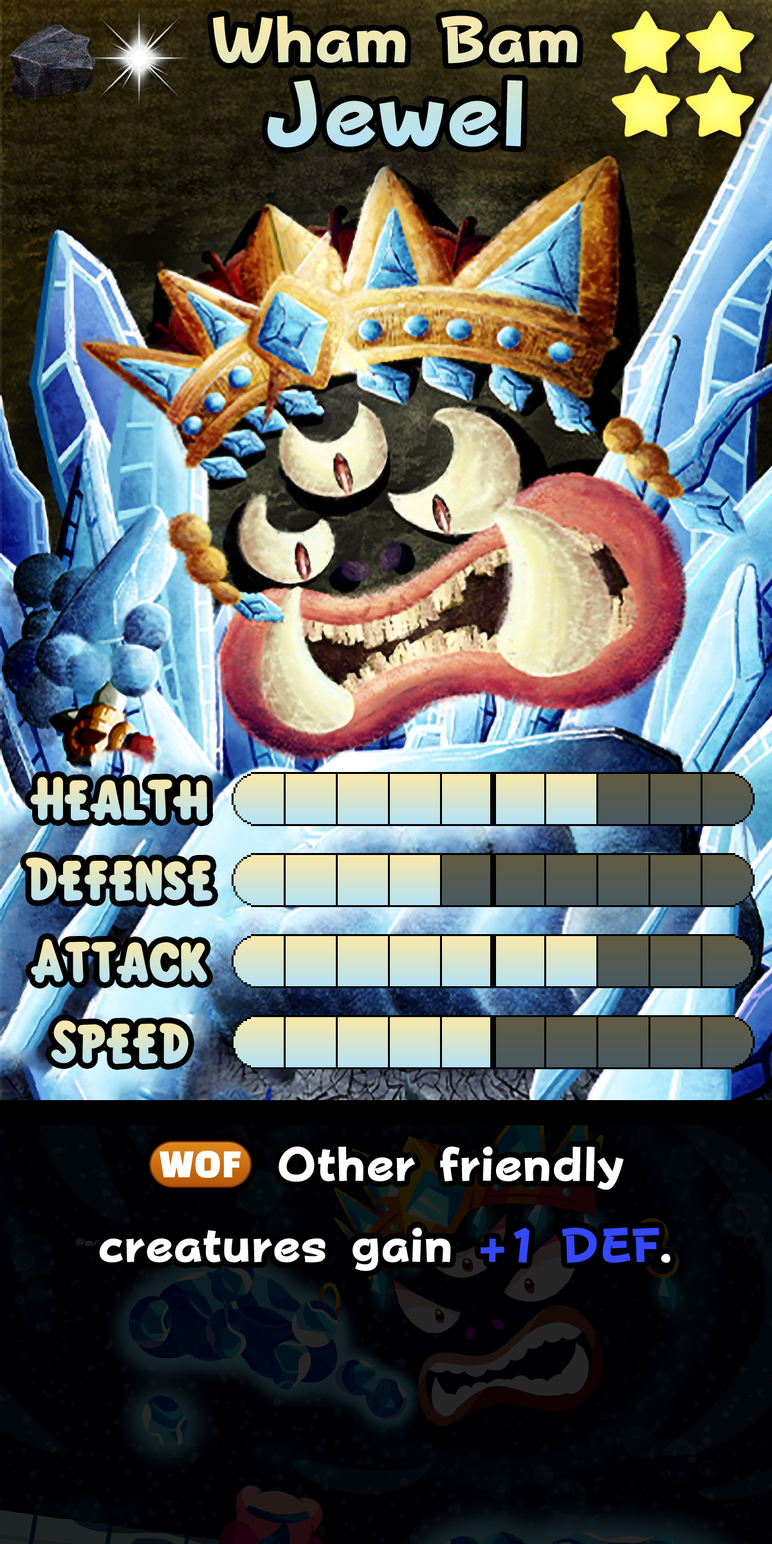
<style>
.page{position:relative;width:772px;height:1544px}
.page>*{position:absolute;margin:0}
.t1{font:110.7px/68.2px "FOTPopHappinessStrp-ExtraBold"}
.t2{font:157px/68.2px "FOTPopHappinessStrp-ExtraBold"}
.t3{font:92.7px "KirbyClassic"}
.t4{font:81.7px "FOTPopHappinessStrp-ExtraBold";color:#ffffff}
.t5{font:47.6px "stoogedings-Regular";color:#ffffff}
.t6{font:81.7px "FOTPopHappinessStrp-ExtraBold";color:#3548fb}
</style>
<div class="page">
<p class="t1" style="left:213px;top:15px;width:365px;height:132px;text-align:center">Wham Bam<br><span class="t2">Jewel</span></p>
<p class="t3" style="left:30px;top:777px;width:178px;height:44px">Health</p>
<p class="t3" style="left:26px;top:858px;width:186px;height:44px">Defense</p>
<p class="t3" style="left:31px;top:939px;width:176px;height:44px">Attack</p>
<p class="t3" style="left:51px;top:1021px;width:138px;height:43px">Speed</p>
<p class="t4" style="left:99px;top:1141px;width:571px;height:130px"><span class="t5">(WOF)</span> Other friendly creatures gain <span class="t6">+1 DEF</span>.</p>
</div>
